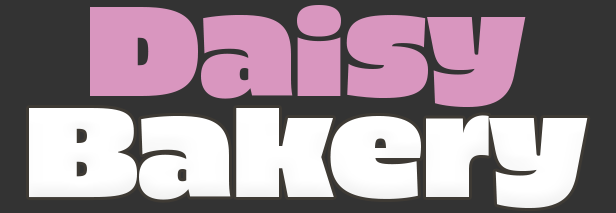
<style>
.page{position:relative;width:616px;height:213px;background:#333333}
.page>*{position:absolute;margin:0}
.t1{font:127.7px "Piepie";color:#d996bf}
.t2{font:127.7px "Piepie";color:#ffffff}
</style>
<div class="page">
<p class="t1" style="left:90px;top:5px;width:436px;height:103px">Daisy</p>
<p class="t2" style="left:29px;top:108px;width:559px;height:101px">Bakery</p>
</div>
